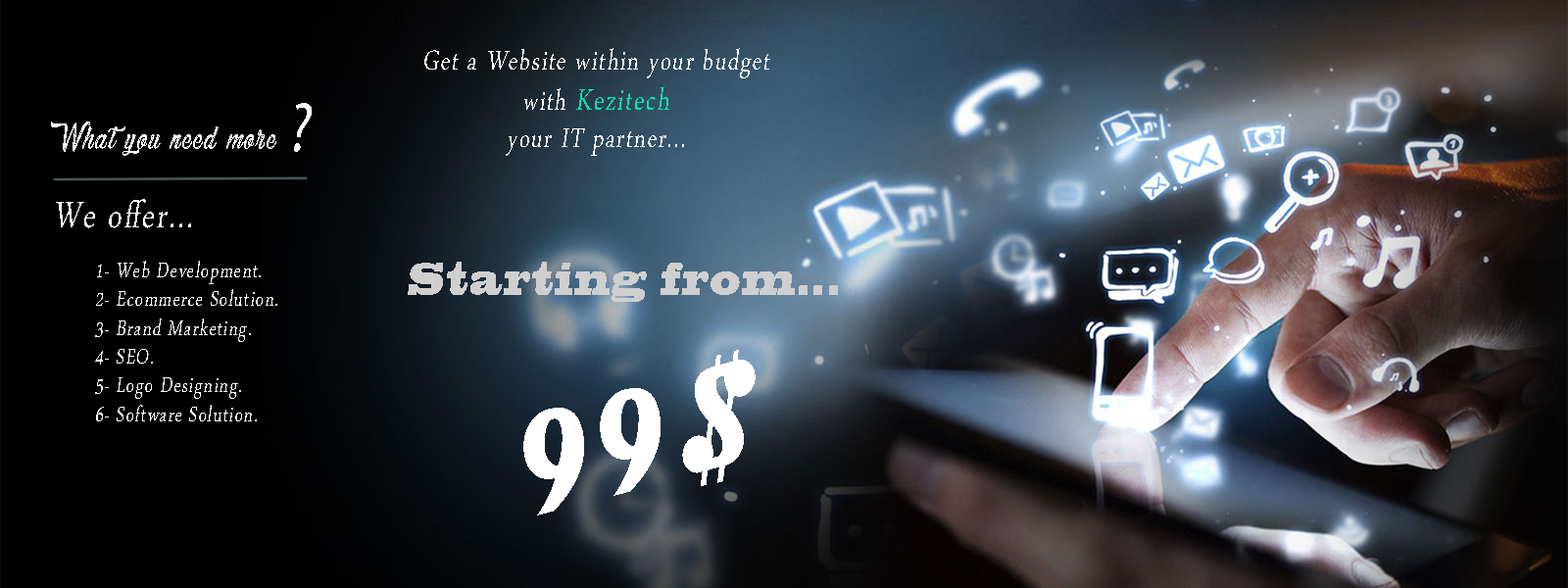
<style>
.page{position:relative;width:1568px;height:588px}
.page>*{position:absolute;margin:0}
.t1{font:40.3px "ArabicTypesetting";letter-spacing:0.05em;color:#ffffff;font-style:italic;scale:0.77 1}
.t2{font:44.1px "ArabicTypesetting";letter-spacing:0.05em;color:#0cdfab;font-style:italic;scale:0.77 1}
.t3{font:70.1px "Chocolate-and-Delight";letter-spacing:0.05em;color:#ffffff;font-style:italic;scale:0.77 1}
.t4{font:70.1px "MyriadPro-Regular";letter-spacing:0.05em;color:#ffffff;font-style:italic;scale:0.77 1}
.t5{font:53.7px "ArabicTypesetting";letter-spacing:0.05em;color:#ffffff;font-style:italic;scale:0.77 1}
.t6{font:31.1px "ArabicTypesetting";letter-spacing:0.05em;color:#ffffff;font-style:italic;scale:0.77 1}
.t7{font:43.7px "BlackoakStd";letter-spacing:0.05em;color:#cfcfcf;font-style:italic;scale:0.52 1}
.t8{font:144.3px "Magneto-Bold";letter-spacing:0.05em;color:#ffffff;font-style:italic;scale:0.77 1}
</style>
<div class="page">
<p class="t1" style="left:424px;top:48px;width:346px;height:108px;text-align:center">Get a Website within your budget<br>with <span class="t2">Kezitech<br></span>your IT partner...</p>
<p class="t3" style="left:51px;top:103px;width:261px;height:53px">What you need more <span class="t4">?</span></p>
<p class="t5" style="left:56px;top:199px;width:135px;height:29px">We offer...</p>
<p class="t6" style="left:95px;top:261px;width:182px;height:160px">1- Web Development.<br>2- Ecommerce Solution.<br>3- Brand Marketing.<br>4- SEO.<br>5- Logo Designing.<br>6- Software Solution.</p>
<p class="t7" style="left:408px;top:262px;width:430px;height:40px">Starting from...</p>
<p class="t8" style="left:523px;top:350px;width:233px;height:165px;rotate:-15deg">99$</p>
</div>
